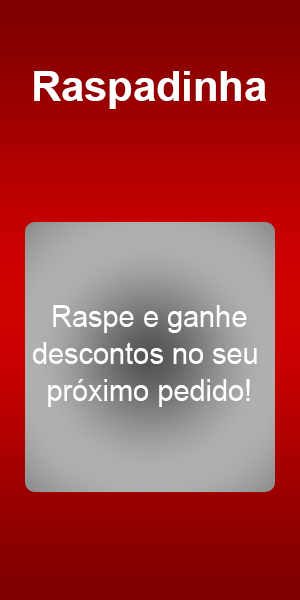
<style>
.page{position:relative;width:300px;height:600px}
.page>*{position:absolute;margin:0}
.t1{font:41.6px "Arial-BoldMT";color:#ffffff}
.t2{font:31.1px "ArialMT";color:#ffffff;scale:0.93 1}
</style>
<div class="page">
<p class="t1" style="left:34px;top:71px;width:232px;height:38px">Raspadinha</p>
<p class="t2" style="left:33px;top:305px;width:224px;height:102px;text-align:center">Raspe e ganhe<br>descontos no seu <br>próximo pedido!</p>
</div>
